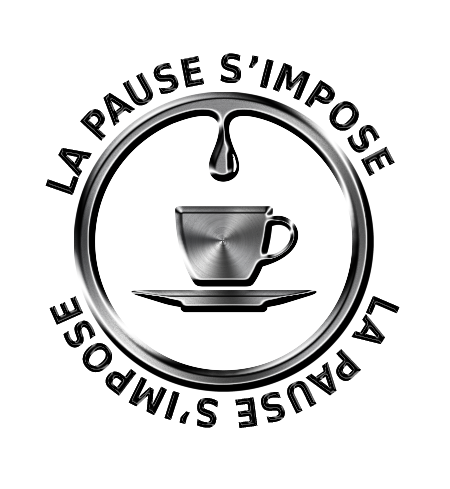
<style>
.page{position:relative;width:450px;height:489px;background:#ffffff}
.page>*{position:absolute;margin:0}
.t1{font:39px "DejaVuSansCondensed-Bold";color:#000000}
</style>
<div class="page">
<p class="t1" style="left:45px;top:53px;width:355px;height:375px;rotate:20deg">LA PAUSE S’IMPOSE        LA PAUSE S’IMPOSE</p>
</div>
